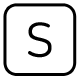
<style>
.page{position:relative;width:80px;height:80px;background:#ffffff}
.page>*{position:absolute;margin:0}
.t1{font:48px "NanumSquareRoundR";color:#000000}
</style>
<div class="page">
<p class="t1" style="left:28px;top:22px;width:24px;height:36px">S</p>
</div>
